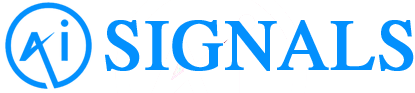
<style>
.page{position:relative;width:415px;height:93px;background:#ffffff}
.page>*{position:absolute;margin:0}
.t1{font:72px "STIXGeneral-Regular";color:#0390fd;font-weight:bold}
</style>
<div class="page">
<p class="t1" style="left:105px;top:20px;width:309px;height:51px">SIGNALS</p>
</div>
